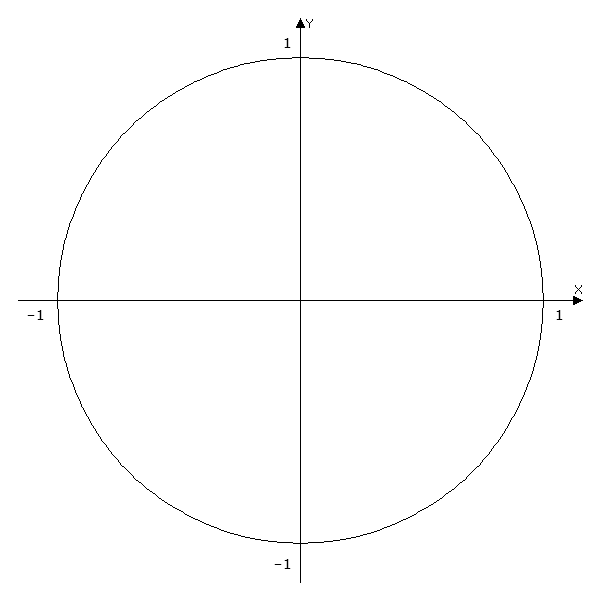
<style>
.page{position:relative;width:600px;height:600px;background:#ffffff}
.page>*{position:absolute;margin:0}
.t1{font:16px "Courier";color:#000000}
</style>
<div class="page">
<p class="t1" style="left:284px;top:38px;width:7px;height:10px">1</p>
<p class="t1" style="left:27px;top:310px;width:17px;height:10px">-1</p>
<p class="t1" style="left:556px;top:310px;width:7px;height:10px">1</p>
<p class="t1" style="left:274px;top:559px;width:17px;height:10px">-1</p>
</div>
